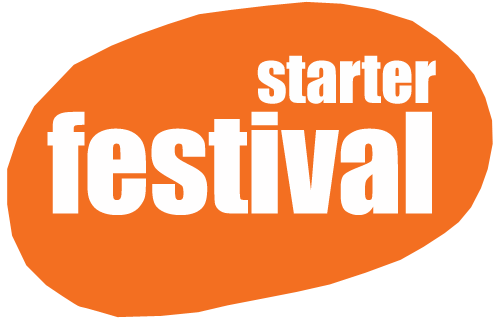
<style>
.page{position:relative;width:500px;height:320px;background:#f36f21}
.page>*{position:absolute;margin:0}
.t1{font:64.3px "Impact";letter-spacing:-0.005em;color:#fefefe}
.t2{font:128.5px "Impact";letter-spacing:-0.005em;color:#fffefe}
</style>
<div class="page">
<p class="t1" style="left:257px;top:55px;width:179px;height:49px">starter</p>
<p class="t2" style="left:47px;top:111px;width:385px;height:104px">festival</p>
</div>
